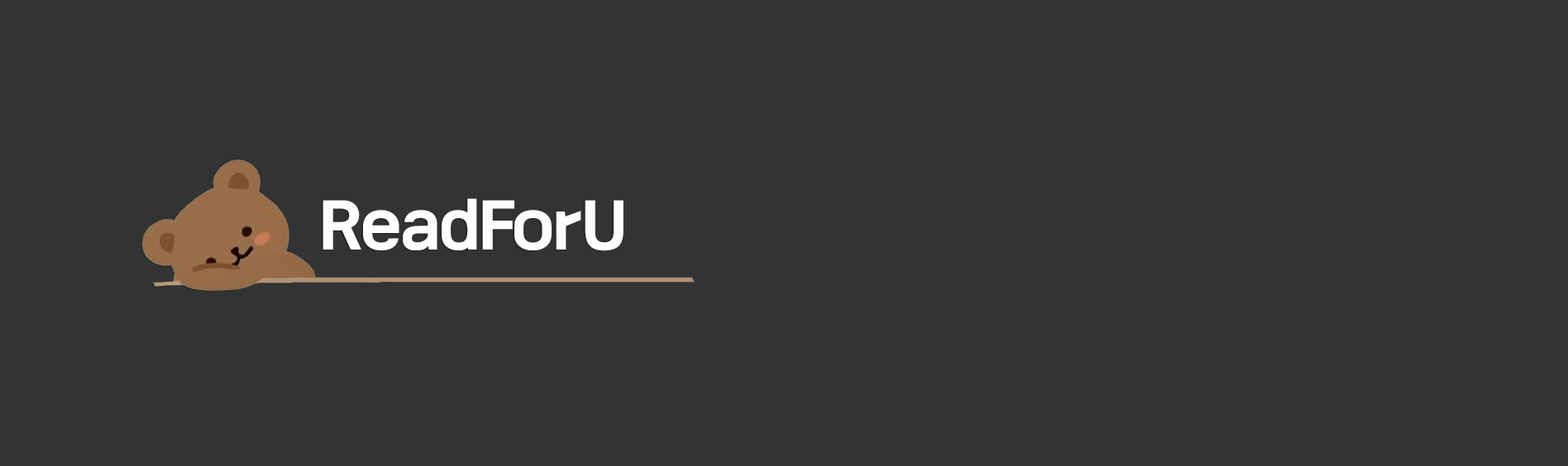
<style>
.page{position:relative;width:1568px;height:466px;background:#333333}
.page>*{position:absolute;margin:0}
.t1{font:60.9px "Cafe24Ohsquare";color:#fdfffe}
</style>
<div class="page">
<p class="t1" style="left:323px;top:198px;width:301px;height:53px">ReadForU</p>
</div>
